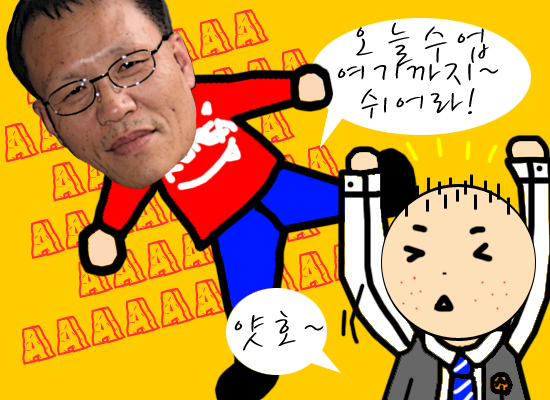
<style>
.page{position:relative;width:550px;height:400px;background:#ffcc00}
.page>*{position:absolute;margin:0}
.t1{font:48px/30px "YDBomnalL";letter-spacing:0.05em;color:#000000}
.t2{font:48px "YDBomnalL";letter-spacing:0.05em;color:#000000}
</style>
<div class="page">
<p class="t1" style="left:338px;top:22px;width:161px;height:97px;text-align:center">오늘수업<br>여기까지~<br>쉬어라!</p>
<p class="t2" style="left:234px;top:310px;width:90px;height:41px">얏호~</p>
</div>
